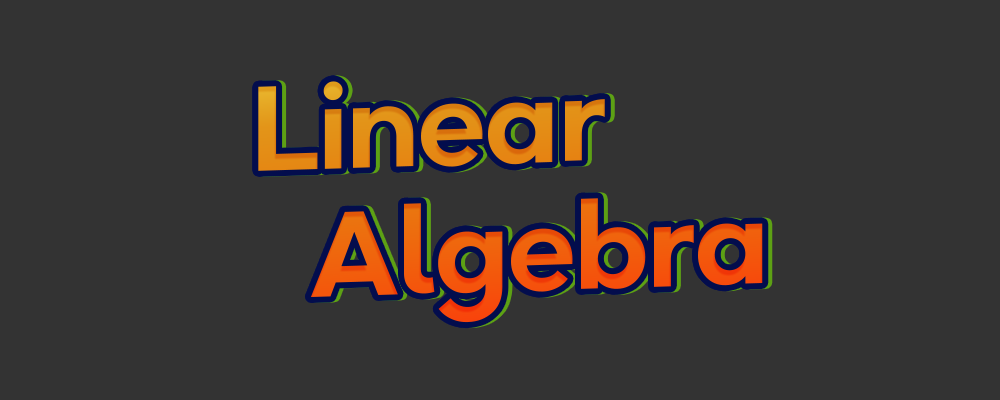
<style>
.page{position:relative;width:1000px;height:400px;background:#333333}
.page>*{position:absolute;margin:0}
.t1{font:119.9px "OktaNeue-Bold";color:#e38c15}
.t2{font:119.9px "OktaNeue-Bold";color:#e38816}
.t3{font:119.9px "OktaNeue-Bold";color:#f15a0c}
.t4{font:119.9px "OktaNeue-Bold";color:#f0560c}
</style>
<div class="page">
<p class="t1" style="left:258px;top:81px;width:347px;height:90px;rotate:-2deg">Linear</p>
<p class="t1" style="left:258px;top:81px;width:347px;height:90px;rotate:-2deg">Linear</p>
<p class="t2" style="left:262px;top:81px;width:347px;height:90px;rotate:-2deg">Linear</p>
<p class="t3" style="left:310px;top:198px;width:453px;height:125px;rotate:-2deg">Algebra</p>
<p class="t3" style="left:310px;top:198px;width:453px;height:125px;rotate:-2deg">Algebra</p>
<p class="t4" style="left:314px;top:198px;width:453px;height:125px;rotate:-2deg">Algebra</p>
</div>
